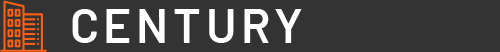
<style>
.page{position:relative;width:500px;height:52px;background:#333333}
.page>*{position:absolute;margin:0}
.t1{font:48px "Barlow-SemiBold";letter-spacing:0.1em;color:#ffffff}
</style>
<div class="page">
<p class="t1" style="left:72px;top:9px;width:230px;height:34px">CENTURY</p>
</div>
